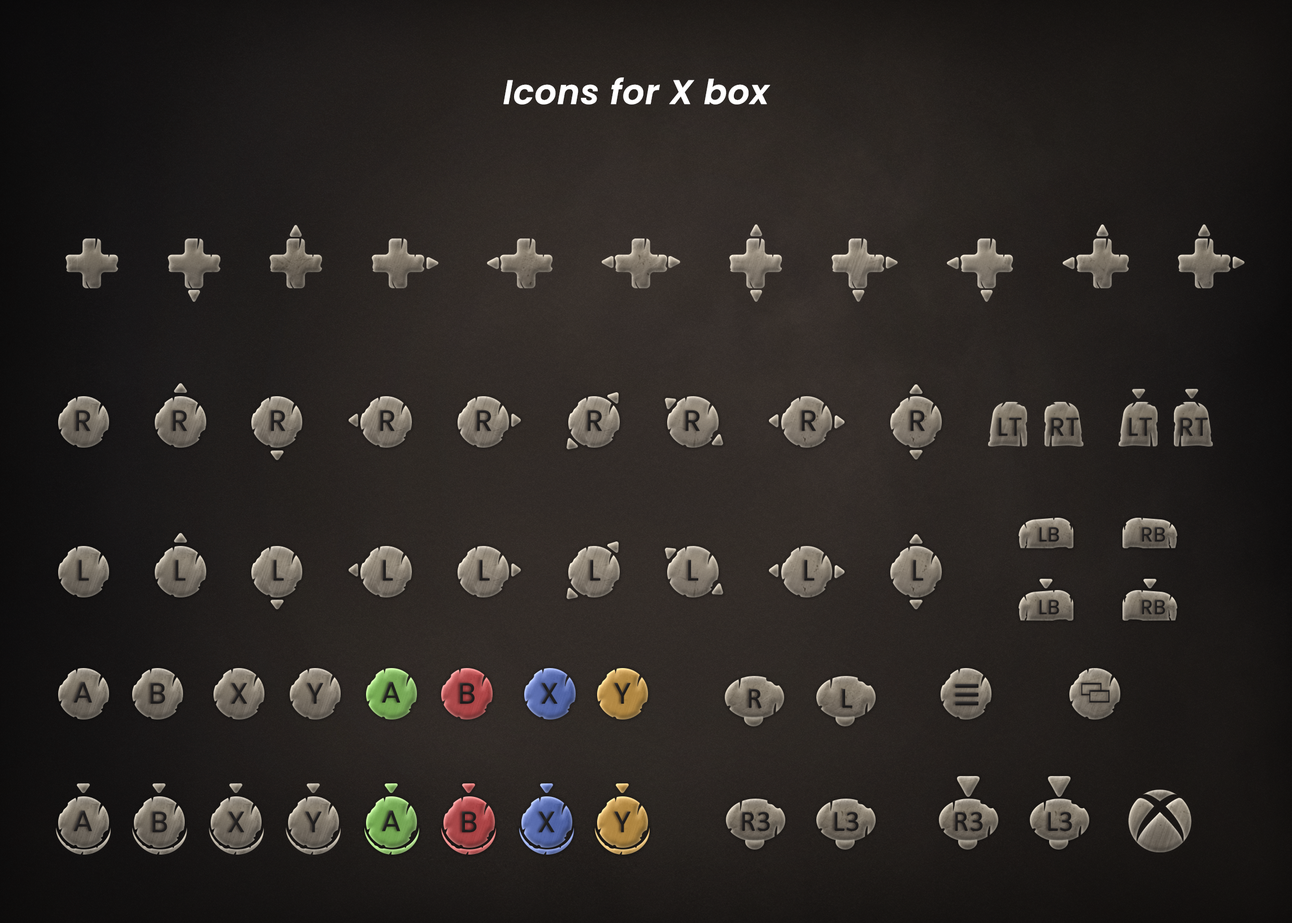
<style>
.page{position:relative;width:1292px;height:923px}
.page>*{position:absolute;margin:0}
.t1{font:33.9px "Poppins-SemiBoldItalic";color:#ffffff;font-weight:bold}
.t2{font:29.2px "Poppins-Regular";color:#201e1e;font-weight:bold}
.t3{font:25.4px "Poppins-Regular";color:#201e1e;font-weight:bold}
.t4{font:20.3px "Poppins-Regular";color:#201e1e;font-weight:bold}
.t5{font:25.4px "Poppins-Regular";font-weight:bold}
.t6{font:29.1px "Calibri";color:#1e1c1c;font-weight:bold}
</style>
<div class="page">
<p class="t1" style="left:503px;top:77px;width:268px;height:28px">Icons for X box</p>
<p class="t2" style="left:76px;top:410px;width:14px;height:21px">R</p>
<p class="t2" style="left:173px;top:410px;width:14px;height:21px">R</p>
<p class="t2" style="left:271px;top:410px;width:14px;height:21px">R</p>
<p class="t2" style="left:380px;top:410px;width:15px;height:21px">R</p>
<p class="t2" style="left:477px;top:410px;width:15px;height:21px">R</p>
<p class="t2" style="left:588px;top:410px;width:14px;height:21px">R</p>
<p class="t2" style="left:685px;top:410px;width:15px;height:21px">R</p>
<p class="t2" style="left:802px;top:410px;width:15px;height:21px">R</p>
<p class="t2" style="left:910px;top:410px;width:15px;height:21px">R</p>
<p class="t3" style="left:998px;top:418px;width:24px;height:18px">LT</p>
<p class="t3" style="left:1051px;top:418px;width:28px;height:18px">RT</p>
<p class="t3" style="left:1129px;top:418px;width:23px;height:18px">LT</p>
<p class="t3" style="left:1180px;top:418px;width:28px;height:18px">RT</p>
<p class="t4" style="left:1040px;top:527px;width:19px;height:15px">LB</p>
<p class="t4" style="left:1142px;top:527px;width:24px;height:15px">RB</p>
<p class="t2" style="left:79px;top:559px;width:10px;height:22px">L</p>
<p class="t5" style="left:80px;top:561px;width:9px;height:18px">L</p>
<p class="t2" style="left:175px;top:559px;width:11px;height:22px">L</p>
<p class="t2" style="left:273px;top:559px;width:11px;height:22px">L</p>
<p class="t2" style="left:383px;top:559px;width:10px;height:22px">L</p>
<p class="t2" style="left:479px;top:559px;width:11px;height:22px">L</p>
<p class="t2" style="left:590px;top:559px;width:11px;height:22px">L</p>
<p class="t2" style="left:688px;top:559px;width:10px;height:22px">L</p>
<p class="t2" style="left:804px;top:559px;width:11px;height:22px">L</p>
<p class="t2" style="left:913px;top:559px;width:11px;height:22px">L</p>
<p class="t4" style="left:1040px;top:600px;width:19px;height:14px">LB</p>
<p class="t4" style="left:1142px;top:600px;width:24px;height:14px">RB</p>
<p class="t2" style="left:73px;top:681px;width:19px;height:21px">A</p>
<p class="t2" style="left:150px;top:683px;width:16px;height:20px">B</p>
<p class="t2" style="left:231px;top:683px;width:16px;height:20px">X</p>
<p class="t2" style="left:307px;top:683px;width:17px;height:20px">Y</p>
<p class="t2" style="left:382px;top:681px;width:19px;height:21px">A</p>
<p class="t2" style="left:460px;top:683px;width:15px;height:20px">B</p>
<p class="t2" style="left:541px;top:683px;width:17px;height:20px">X</p>
<p class="t2" style="left:614px;top:683px;width:17px;height:20px">Y</p>
<p class="t6" style="left:749px;top:689px;width:13px;height:19px">R</p>
<p class="t6" style="left:842px;top:689px;width:11px;height:19px">L</p>
<p class="t2" style="left:73px;top:810px;width:19px;height:21px">A</p>
<p class="t2" style="left:153px;top:811px;width:14px;height:21px">B</p>
<p class="t2" style="left:228px;top:811px;width:17px;height:21px">X</p>
<p class="t2" style="left:305px;top:811px;width:17px;height:21px">Y</p>
<p class="t2" style="left:382px;top:810px;width:19px;height:21px">A</p>
<p class="t2" style="left:462px;top:811px;width:15px;height:21px">B</p>
<p class="t2" style="left:538px;top:811px;width:17px;height:21px">X</p>
<p class="t2" style="left:614px;top:811px;width:17px;height:21px">Y</p>
<p class="t6" style="left:742px;top:811px;width:28px;height:20px">R3</p>
<p class="t6" style="left:835px;top:811px;width:24px;height:20px">L3</p>
<p class="t6" style="left:955px;top:811px;width:28px;height:20px">R3</p>
<p class="t6" style="left:1048px;top:811px;width:24px;height:20px">L3</p>
</div>
